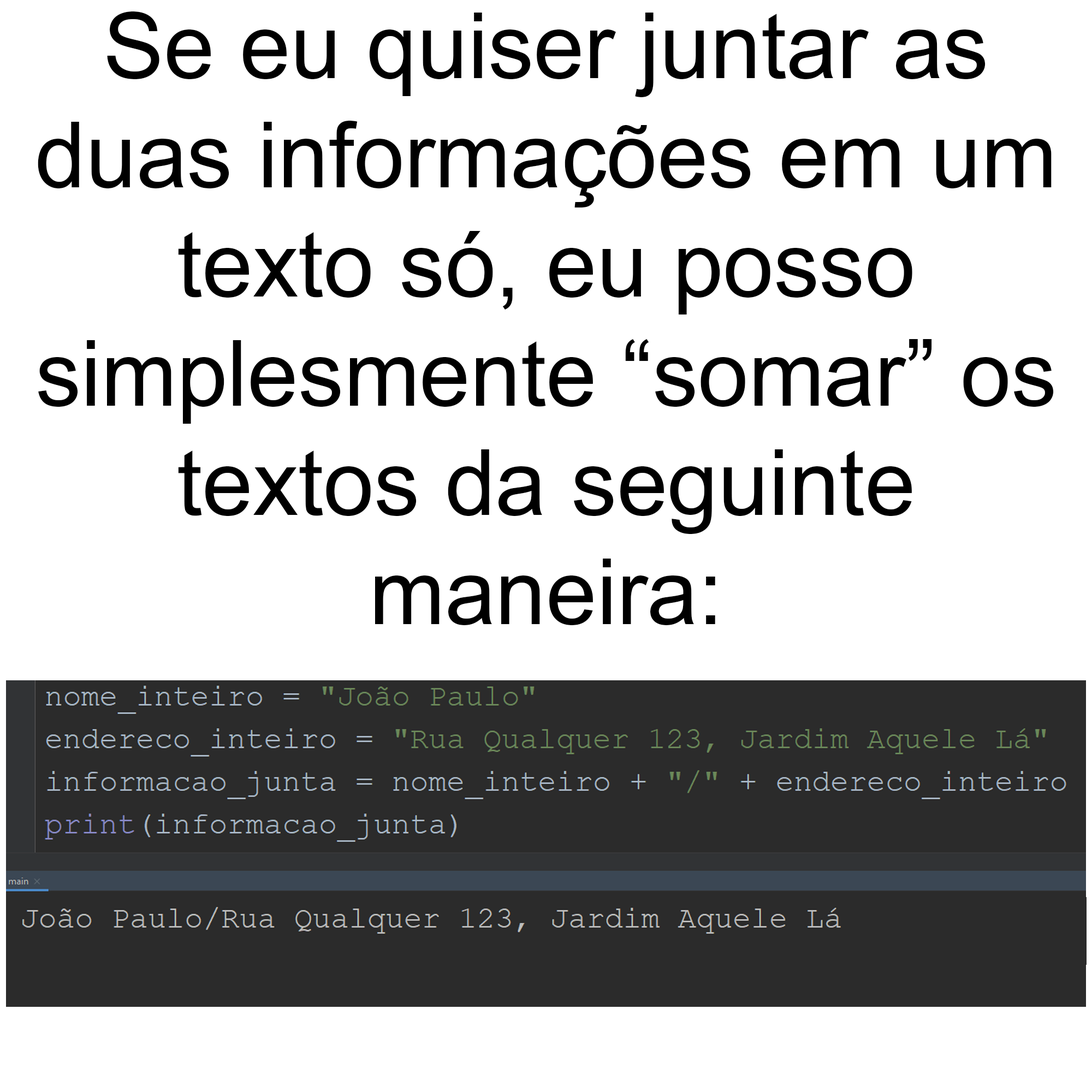
<style>
.page{position:relative;width:1092px;height:1092px;background:#ffffff}
.page>*{position:absolute;margin:0}
.t1{font:91px "ArialMT";color:#000000}
</style>
<div class="page">
<p class="t1" style="left:38px;top:11px;width:1016px;height:614px;text-align:center">Se eu quiser juntar as<br>duas informações em um<br>texto só, eu posso<br>simplesmente “somar” os<br>textos da seguinte<br>maneira:</p>
</div>
